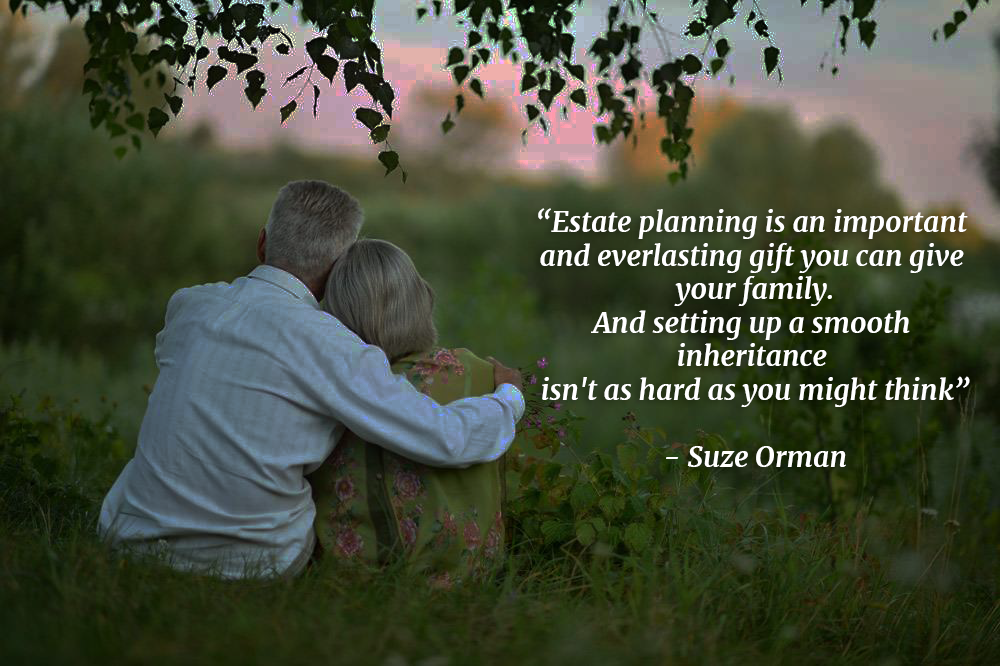
<style>
.page{position:relative;width:1000px;height:666px}
.page>*{position:absolute;margin:0}
.t1{font:28px "Merriweather-BoldItalic";color:#ffffff}
</style>
<div class="page">
<p class="t1" style="left:538px;top:208px;width:432px;height:259px;text-align:center">“Estate planning is an important <br>and everlasting gift you can give <br>your family.<br>And setting up a smooth <br>inheritance <br>isn't as hard as you might think”<br><br>- Suze Orman</p>
</div>
